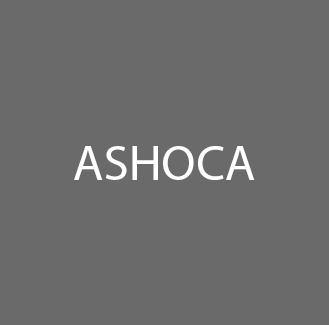
<style>
.page{position:relative;width:329px;height:325px;background:#6a6a6a}
.page>*{position:absolute;margin:0}
.t1{font:50px "MyriadPro-Regular";color:#ffffff;text-transform:uppercase}
</style>
<div class="page">
<p class="t1" style="left:74px;top:146px;width:181px;height:34px">Ashoca</p>
</div>
